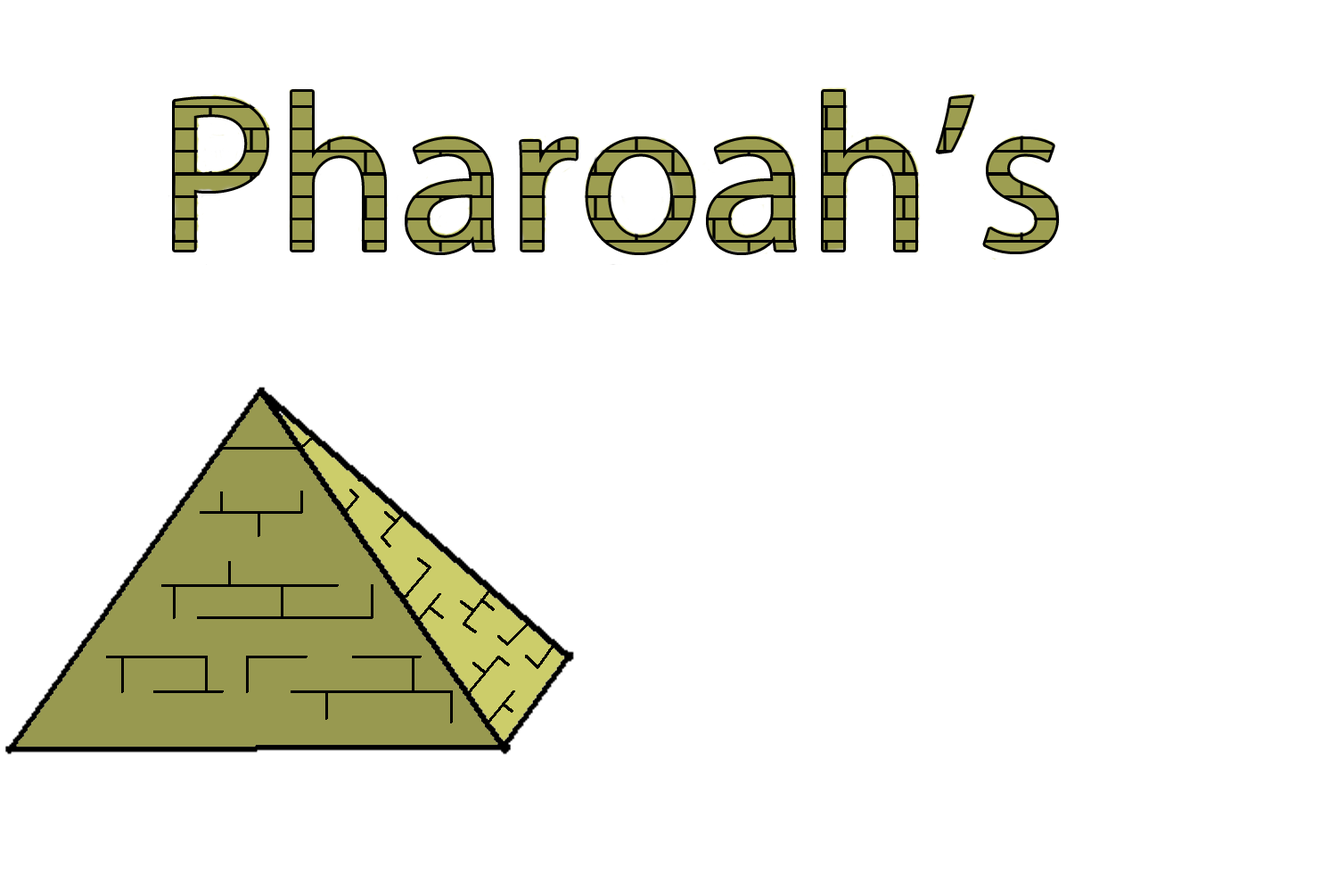
<style>
.page{position:relative;width:1337px;height:892px;background:#ffffff}
.page>*{position:absolute;margin:0}
.t1{font:222px "MyriadPro-Regular";color:#9d9e51}
</style>
<div class="page">
<p class="t1" style="left:175px;top:92px;width:882px;height:160px">Pharoah’s</p>
</div>
